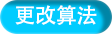
<style>
.page{position:relative;width:112px;height:34px;background:#00ccff}
.page>*{position:absolute;margin:0}
.t1{font:20.8px "AdobeHeitiStd-Regular";color:#ffffff}
</style>
<div class="page">
<p class="t1" style="left:15px;top:5px;width:82px;height:20px">更改算法</p>
</div>
